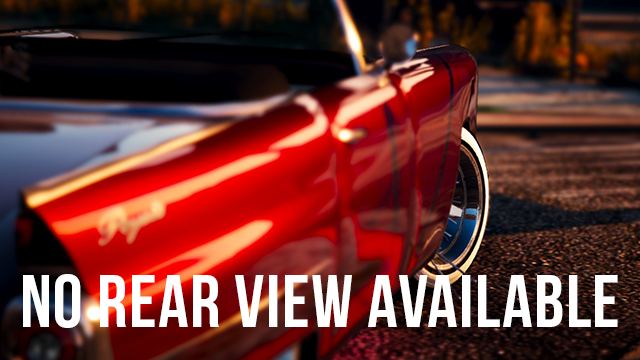
<style>
.page{position:relative;width:640px;height:360px}
.page>*{position:absolute;margin:0}
.t1{font:74.8px "BebasNeue";letter-spacing:0.02em;color:#ffffff}
</style>
<div class="page">
<p class="t1" style="left:23px;top:274px;width:595px;height:54px">No Rear View Available</p>
</div>
